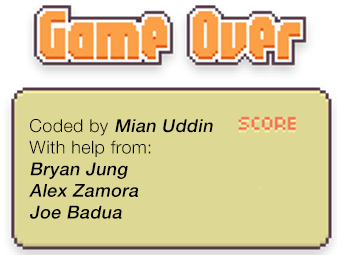
<style>
.page{position:relative;width:337px;height:258px;background:#ded895}
.page>*{position:absolute;margin:0}
.t1{font:18px "HelveticaNeue-Medium";letter-spacing:0.02em;color:#000000;font-style:italic}
.t2{font:18px "HelveticaNeue-Light";letter-spacing:0.02em;color:#000000}
</style>
<div class="page">
<p class="t1" style="left:29px;top:119px;width:184px;height:100px"><span class="t2">Coded by </span>Mian Uddin<br><span class="t2">With help from:<br></span>Bryan Jung<br>Alex Zamora<br>Joe Badua</p>
</div>
